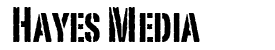
<style>
.page{position:relative;width:275px;height:50px;background:#ffffff}
.page>*{position:absolute;margin:0}
.t1{font:48px "PortagoITCTT";color:#000000}
</style>
<div class="page">
<p class="t1" style="left:13px;top:7px;width:187px;height:35px">Hayes Media</p>
</div>
